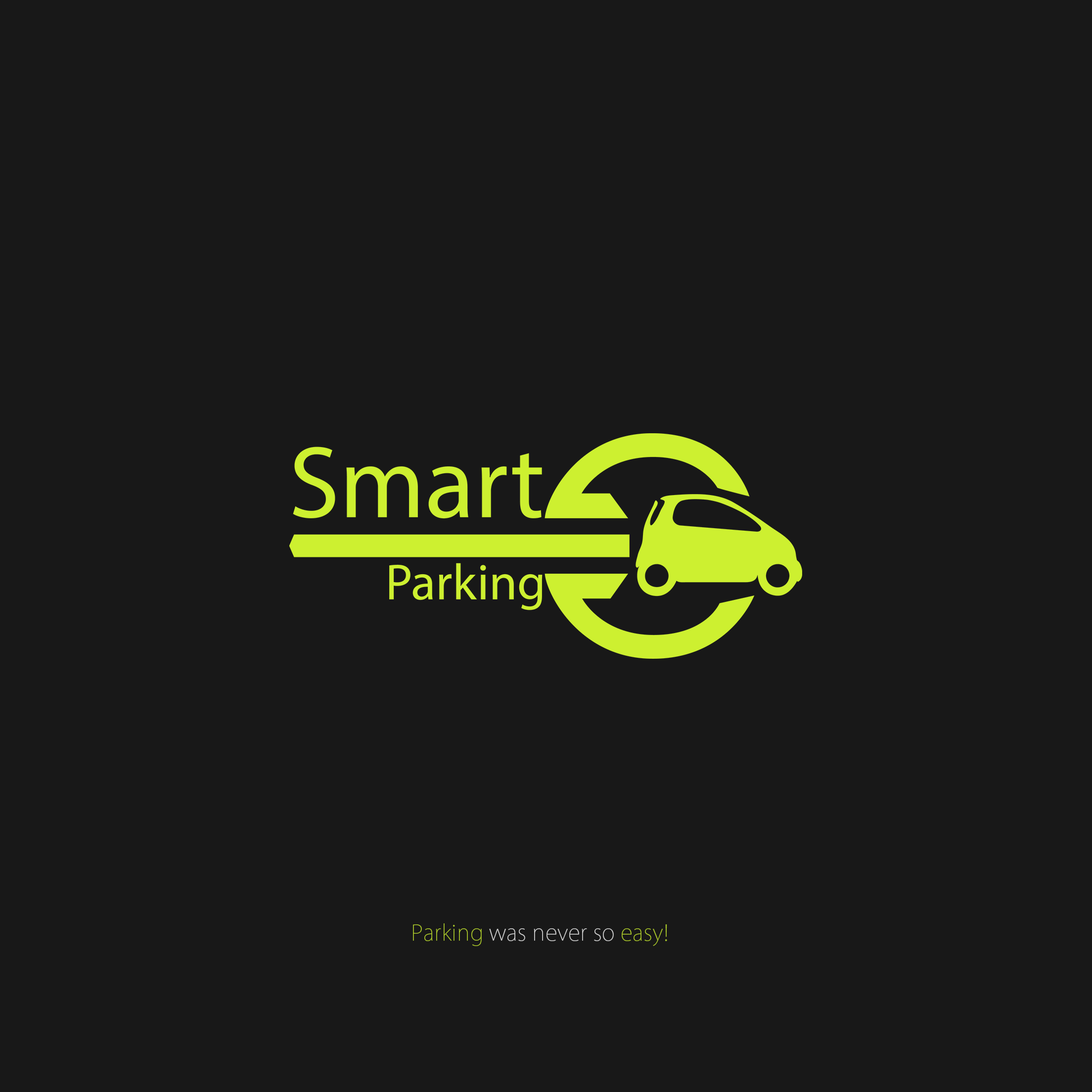
<style>
.page{position:relative;width:1092px;height:1092px;background:#181818}
.page>*{position:absolute;margin:0}
.t1{font:21.8px "KozGoPr6N-ExtraLight";letter-spacing:0.015em}
</style>
<div class="page">
<p class="t1" style="left:413px;top:923px;width:254px;height:23px">Parking was never so easy!</p>
</div>
